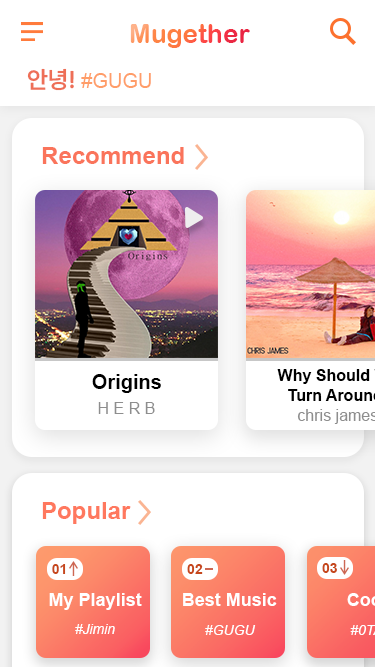
<style>
.page{position:relative;width:375px;height:667px;background:#ffffff}
.page>*{position:absolute;margin:0}
.t1{font:26.1px "ArialRoundedMTBold"}
.t2{font:20px "ArialMT";color:#ff9d68}
.t3{font:24px "PretendardVariable-SemiBold";color:#ee6f57}
.t4{font:24px "Arial-BoldMT";color:#fa745b}
.t5{font:20px "Arial-BoldMT";color:#000000}
.t6{font:16px "ArialMT";color:#8e8e8e}
.t7{font:24px "Arial-BoldMT";color:#ff785e}
.t8{font:14px "Arial-BoldMT";color:#c6471b}
.t9{font:18px "Arial-BoldMT";color:#ffffff}
.t10{font:14px "Arial-ItalicMT";color:#ffffff}
.t11{font:14px "Arial-ItalicMT";color:#fefefe}
</style>
<div class="page">
<p class="t1" style="left:130px;top:24px;width:120px;height:24px">Mugether</p>
<p class="t2" style="left:27px;top:68px;width:124px;height:23px"><span class="t3">안녕! </span>#GUGU</p>
<p class="t4" style="left:42px;top:147px;width:142px;height:17px">Recommend</p>
<p class="t5" style="left:92px;top:374px;width:69px;height:19px">Origins</p>
<p class="t6" style="left:98px;top:402px;width:57px;height:12px">H E R B</p>
<p class="t7" style="left:42px;top:502px;width:89px;height:22px">Popular</p>
<p class="t8" style="left:52px;top:564px;width:14px;height:10px">01</p>
<p class="t8" style="left:187px;top:564px;width:16px;height:10px">02</p>
<p class="t8" style="left:322px;top:563px;width:15px;height:10px">03</p>
<p class="t9" style="left:49px;top:593px;width:93px;height:17px">My Playlist</p>
<p class="t9" style="left:183px;top:593px;width:94px;height:13px">Best Music</p>
<p class="t10" style="left:75px;top:624px;width:40px;height:10px">#Jimin</p>
<p class="t11" style="left:205px;top:625px;width:51px;height:10px">#GUGU</p>
</div>
